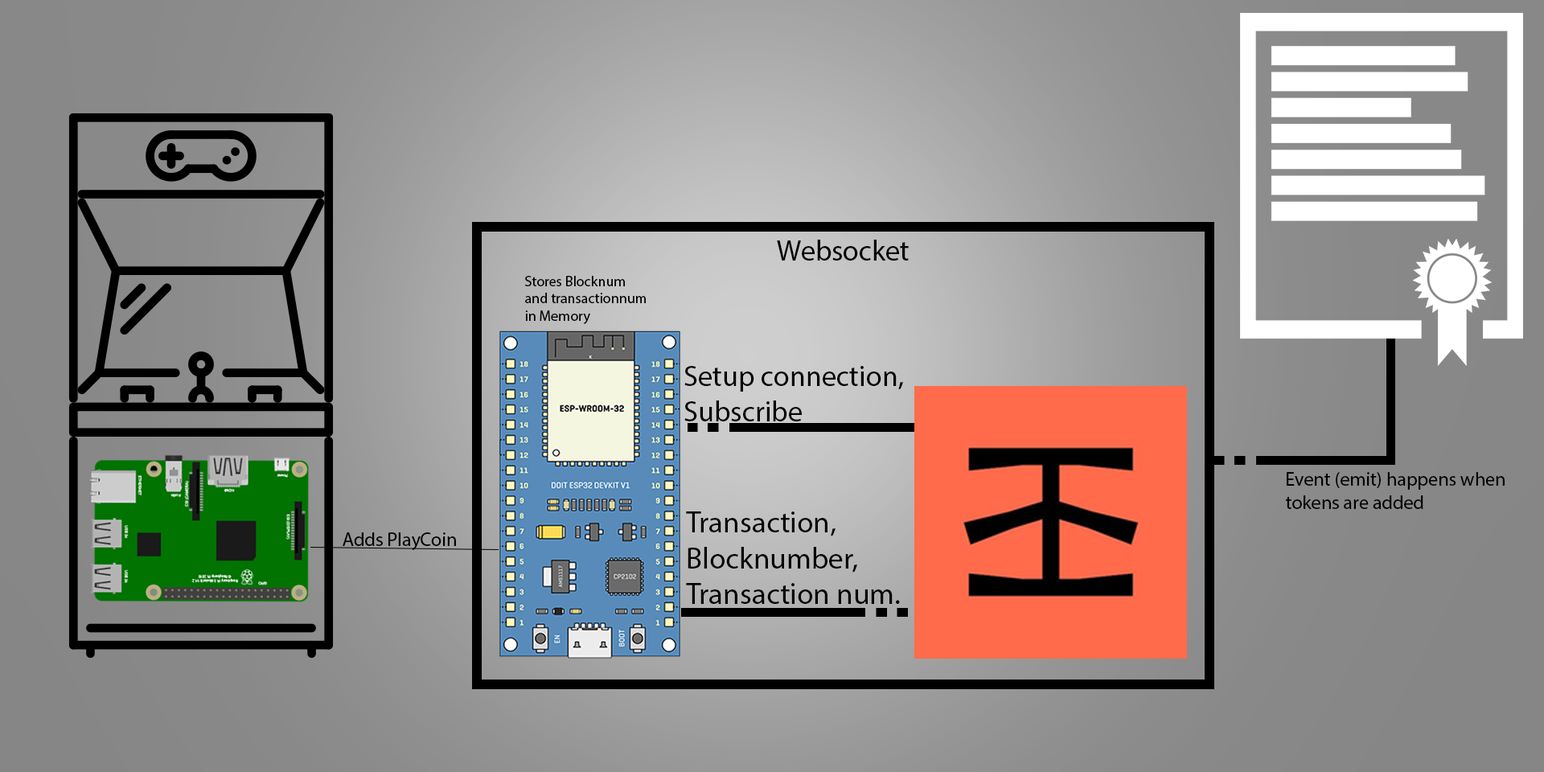
<style>
.page{position:relative;width:1544px;height:772px}
.page>*{position:absolute;margin:0}
.t1{font:29px "MyriadPro-Regular";color:#000000}
.t2{font:14.5px "MyriadPro-Regular";color:#000000}
.t3{font:19.3px "MyriadPro-Regular";color:#000000}
.t4{font:30px "MyriadPro-Regular";color:#000000}
</style>
<div class="page">
<p class="t1" style="left:777px;top:240px;width:132px;height:21px">Websocket</p>
<p class="t2" style="left:525px;top:276px;width:121px;height:48px">Stores Blocknum<br>and transactionnum<br>in Memory</p>
<p class="t1" style="left:684px;top:366px;width:219px;height:55px">Setup connection,<br>Subscribe</p>
<p class="t3" style="left:1285px;top:472px;width:220px;height:37px">Event (emit) happens when<br>tokens are added</p>
<p class="t4" style="left:686px;top:512px;width:214px;height:92px">Transaction,<br>Blocknumber,<br>Transaction num.</p>
<p class="t3" style="left:343px;top:532px;width:113px;height:18px">Adds PlayCoin</p>
</div>
